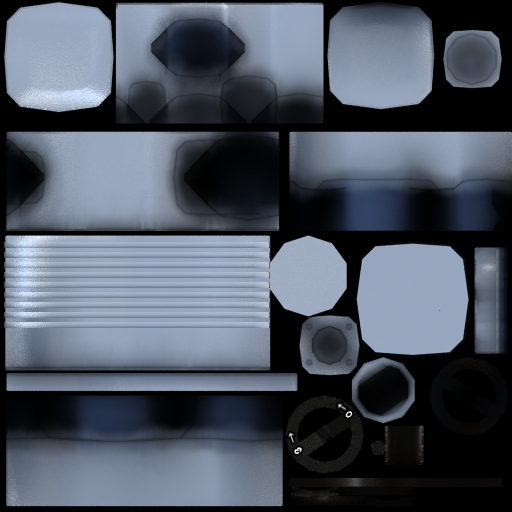
<style>
.page{position:relative;width:512px;height:512px}
.page>*{position:absolute;margin:0}
.t1{font:9.9px "Arial-BoldMT";color:#ffffff;scale:0.51 1}
.t2{font:16.1px "Arial-BoldMT";color:#ffffff;scale:0.51 1}
</style>
<div class="page">
<p class="t1" style="left:345px;top:411px;width:8px;height:7px;rotate:49deg;opacity:0.9">О</p>
<p class="t2" style="left:294px;top:447px;width:8px;height:7px;rotate:-129deg;opacity:0.9">з</p>
</div>
